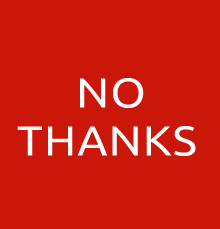
<style>
.page{position:relative;width:220px;height:229px;background:#cb170a}
.page>*{position:absolute;margin:0}
.t1{font:41.7px "Ubuntu";letter-spacing:0.02em;color:#fefcfc;text-transform:uppercase;scale:1.1 1}
</style>
<div class="page">
<p class="t1" style="left:80px;top:78px;width:64px;height:30px">NO</p>
<p class="t1" style="left:17px;top:126px;width:179px;height:30px">THANKS</p>
</div>
